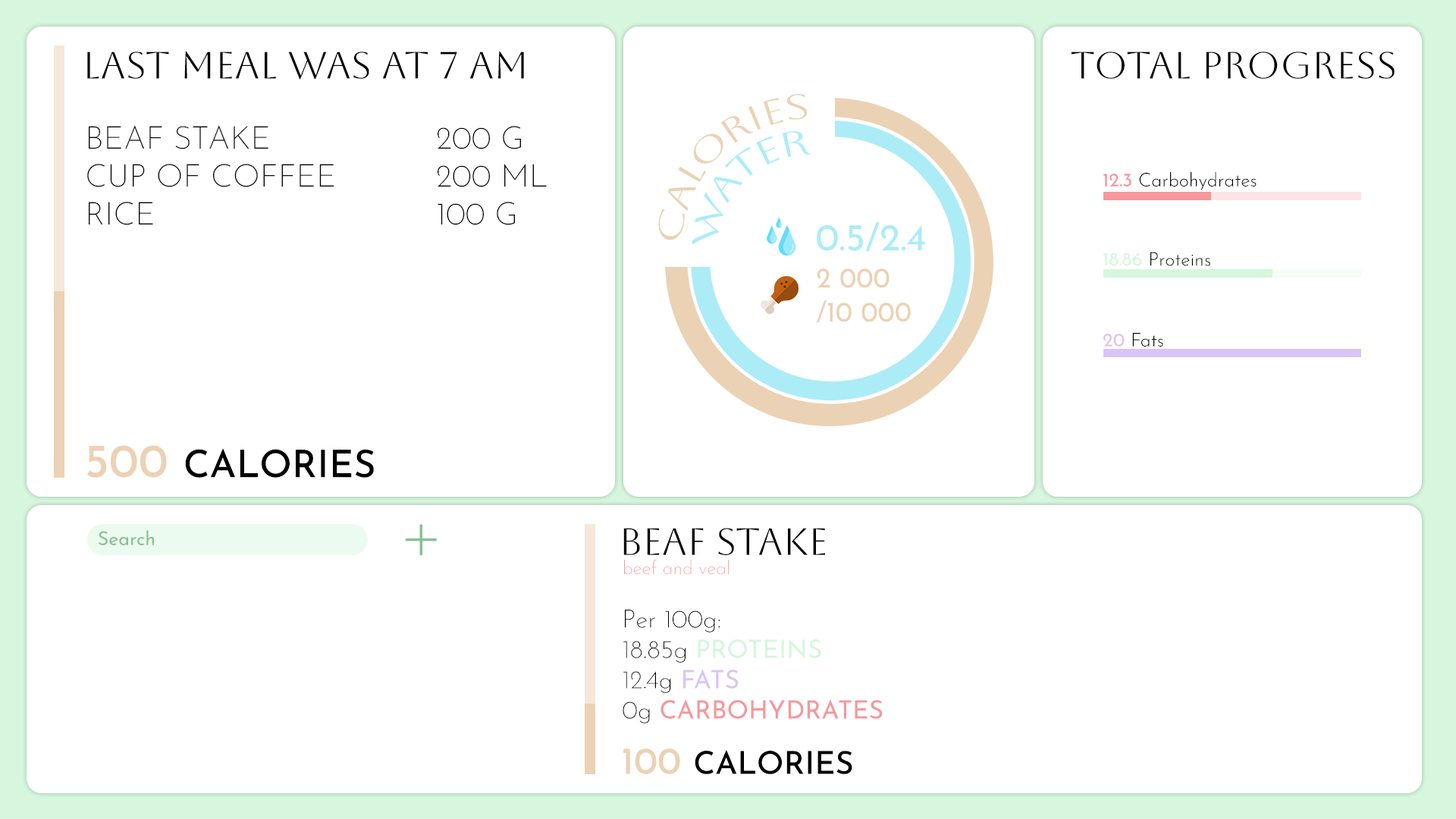
<style>
.page{position:relative;width:1456px;height:819px;background:#ffffff}
.page>*{position:absolute;margin:0}
.t1{font:37.9px "Aboreto-Regular";color:#000000}
.t2{font:34.8px "Aboreto-Regular";color:#ebd2b4}
.t3{font:31.6px "JosefinSansRoman-ExtraLight";color:#000000;text-transform:uppercase}
.t4{font:34.8px "Aboreto-Regular";color:#acecf7}
.t5{font:19px "JosefinSansRoman-Light";color:#000000}
.t6{font:19px "JosefinSansRoman-Regular";color:#f4989c}
.t7{font:37.9px "JosefinSansRoman-Regular";color:#acecf7}
.t8{font:19px "JosefinSansRoman-Regular";color:#d6f6dd}
.t9{font:28.4px "JosefinSansRoman-Regular";color:#ebd2b4;scale:0.95 1}
.t10{font:19px "JosefinSansRoman-Regular";color:#dac4f7}
.t11{font:37.9px "JosefinSansRoman-Medium";color:#000000}
.t12{font:47.4px "JosefinSansRoman-Medium";color:#ebd2b4}
.t13{font:19px "JosefinSansRoman-Regular";color:#8bc095}
.t14{font:85.5px "JosefinSansRoman-ExtraLight";color:#8bc095}
.t15{font:19px "JosefinSansRoman-ExtraLight";color:#f4989c}
.t16{font:25.3px "JosefinSansRoman-ExtraLight";color:#000000}
.t17{font:25.3px "JosefinSansRoman-Regular";color:#d6f6dd}
.t18{font:25.3px "JosefinSansRoman-Regular";color:#dac4f7}
.t19{font:25.3px "JosefinSansRoman-Regular";color:#f4989c}
.t20{font:31.6px "JosefinSansRoman-Medium";color:#000000}
.t21{font:37.9px "JosefinSansRoman-Medium";color:#ebd2b4}
</style>
<div class="page">
<p class="t1" style="left:87px;top:51px;width:437px;height:29px">Last meal was at 7 AM</p>
<p class="t1" style="left:1072px;top:52px;width:323px;height:27px">Total progresS</p>
<p class="t2" style="left:658px;top:94px;width:150px;height:146px;rotate:-44deg">CALORIES</p>
<p class="t3" style="left:87px;top:125px;width:247px;height:100px">Beaf Stake       <br>Cup of coffee<br>Rice</p>
<p class="t3" style="left:438px;top:126px;width:109px;height:99px">200 g<br>200 ml<br>100 g</p>
<p class="t4" style="left:692px;top:131px;width:119px;height:114px;rotate:-44deg">WATER</p>
<p class="t5" style="left:1103px;top:171px;width:154px;height:19px"><span class="t6">12.3</span> Carbohydrates</p>
<p class="t7" style="left:817px;top:222px;width:108px;height:30px">0.5/2.4</p>
<p class="t5" style="left:1103px;top:252px;width:107px;height:14px"><span class="t8">18.86 </span>Proteins</p>
<p class="t9" style="left:816px;top:268px;width:95px;height:54px">2 000<br>/10 000</p>
<p class="t5" style="left:1103px;top:333px;width:60px;height:14px"><span class="t10">20</span> Fats</p>
<p class="t11" style="left:87px;top:445px;width:287px;height:33px"><span class="t12">500 </span>CALORIES</p>
<p class="t13" style="left:99px;top:530px;width:55px;height:15px">Search</p>
<p class="t14" style="left:405px;top:524px;width:32px;height:32px">+</p>
<p class="t1" style="left:623px;top:528px;width:202px;height:27px">Beaf stake</p>
<p class="t15" style="left:624px;top:560px;width:106px;height:15px">beef and veal</p>
<p class="t16" style="left:623px;top:610px;width:260px;height:113px">Per 100g:<br>18.85g <span class="t17">PROTEINS<br></span>12.4g <span class="t18">FATS<br></span>0g <span class="t19">CARBOHYDRATES</span></p>
<p class="t20" style="left:623px;top:748px;width:229px;height:26px"><span class="t21">100 </span>CALORIES</p>
</div>
